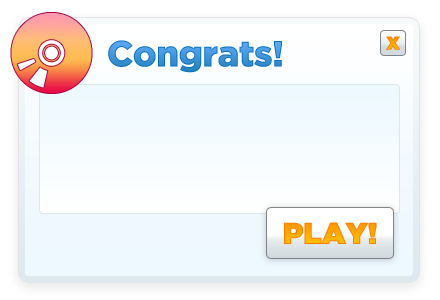
<style>
.page{position:relative;width:440px;height:300px}
.page>*{position:absolute;margin:0}
.t1{font:36px "Gotham-Black";letter-spacing:-0.01em}
.t2{font:24px "Gotham-Black";color:#ffa000}
.t3{font:30px "Gotham-Ultra"}
</style>
<div class="page">
<p class="t1" style="left:108px;top:40px;width:174px;height:33px">Congrats!</p>
<p class="t2" style="left:386px;top:36px;width:14px;height:14px">x</p>
<p class="t3" style="left:284px;top:222px;width:93px;height:22px">PLAY!</p>
</div>
